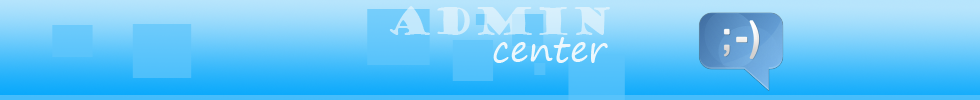
<style>
.page{position:relative;width:980px;height:100px}
.page>*{position:absolute;margin:0}
.t1{font:36px "GoudyStout";color:#d0edfc}
.t2{font:36px "SegoePrint";color:#edf7fc}
</style>
<div class="page">
<p class="t1" style="left:389px;top:6px;width:221px;height:29px">Admin</p>
<p class="t2" style="left:493px;top:37px;width:115px;height:26px">center</p>
</div>
